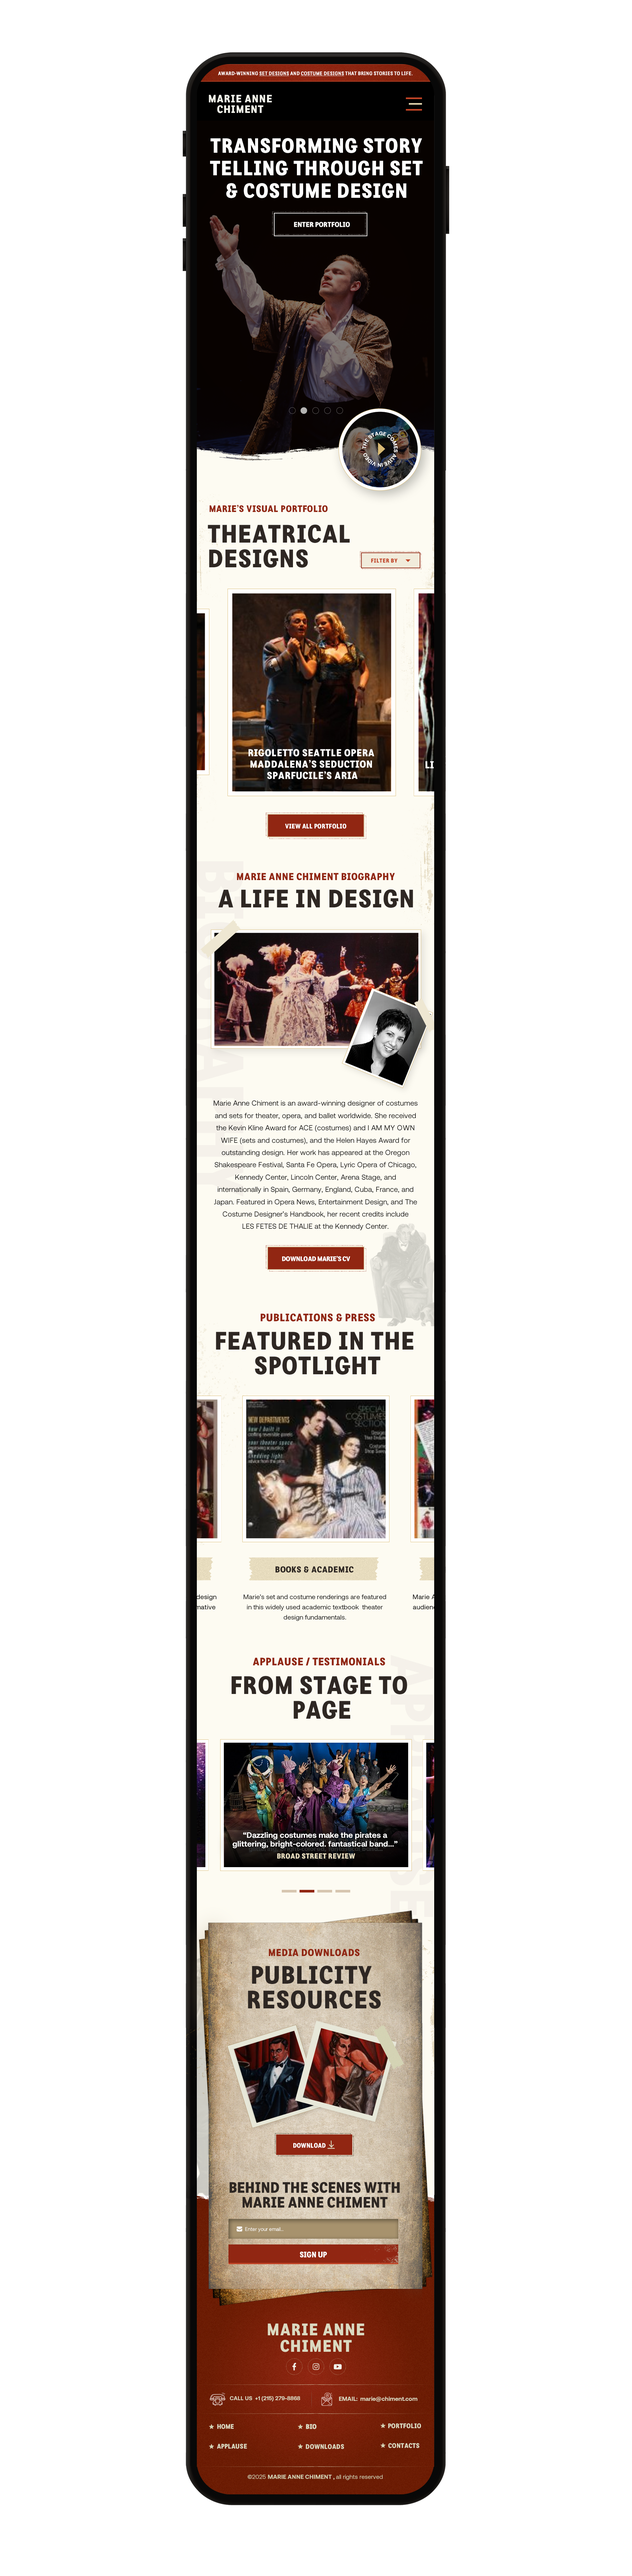
<style>
.page{position:relative;width:632px;height:2576px;background:#ffffff}
.page>*{position:absolute;margin:0}
.t1{font:4.9px "MatitaInformal-Medium";letter-spacing:0.01em;color:#ffffff;font-weight:bold}
.t2{font:4.9px "MatitaInformal-Medium";letter-spacing:0.01em;color:#ffffff;font-weight:bold;text-decoration:underline}
.t3{font:10.5px/10.5px "MatitaInformal-Bold";letter-spacing:0.06em;color:#f1f1e9}
.t4{font:20.1px/22.5px "MatitaInformal-Bold";letter-spacing:0.035em;color:#ffffff}
.t5{font:6.9px "MatitaInformal-Bold";color:#ffffff;scale:1.03 1}
.t6{font:5.3px/5.7px "Aeonik-Bold";letter-spacing:0.025em;color:#ffffff}
.t7{font:9.2px "MatitaInformal-Bold";letter-spacing:0.03em;color:#912612}
.t8{font:24.7px/24.7px "MatitaInformal-Bold";letter-spacing:0.032em;color:#2e2723}
.t9{font:5.6px "MatitaInformal-Bold";letter-spacing:0.05em;color:#c14426}
.t10{font:9.9px/11.4px "MatitaInformal-Bold";letter-spacing:0.04em;color:#ffffff}
.t11{font:6.6px "MatitaInformal-Bold";letter-spacing:0.025em;color:#ffffff;scale:0.96 1}
.t12{font:9.9px "MatitaInformal-Bold";letter-spacing:0.032em;color:#912612}
.t13{font:24.7px "MatitaInformal-Bold";letter-spacing:0.03em;color:#2e2723}
.t14{font:7.2px/12.3px "Aeonik-Regular";letter-spacing:0.002em;color:#141414}
.t15{font:6.6px "MatitaInformal-Bold";letter-spacing:-0.015em;color:#ffffff;scale:1.04 1}
.t16{font:10.5px "MatitaInformal-Bold";letter-spacing:0.035em;color:#912612}
.t17{font:24.7px/24.7px "MatitaInformal-Bold";letter-spacing:0.03em;color:#2e2723}
.t18{font:8.6px "MatitaInformal-Bold";letter-spacing:0.036em;color:#2e2723}
.t19{font:6.6px/10.2px "Aeonik-Regular";letter-spacing:0.002em;color:#141414}
.t20{font:7.9px/8.7px "Aeonik-Bold";color:#ffffff}
.t21{font:7.2px "MatitaInformal-Bold";letter-spacing:0.035em;color:#e7dcbe}
.t22{font:9.9px "MatitaInformal-Bold";letter-spacing:0.03em;color:#912612}
.t23{font:24.7px/24.7px "MatitaInformal-Bold";letter-spacing:0.035em;color:#2e2723}
.t24{font:6.6px "MatitaInformal-Bold";letter-spacing:0.03em;color:#ffffff;scale:0.95 1}
.t25{font:14.8px/14.8px "MatitaInformal-Bold";letter-spacing:0.006em;color:#2e2723}
.t26{font:5.2px "Aeonik-Regular";color:#ffffff;scale:0.94 1}
.t27{font:7.9px "MatitaInformal-Bold";color:#ffffff}
.t28{font:16.5px/16.5px "MatitaInformal-Bold";letter-spacing:0.05em;color:#dbd9c0}
.t29{font:5.6px "Aeonik-Bold";color:#dbd9c0}
.t30{font:5.9px "Aeonik-Bold";letter-spacing:0.001em;color:#dbd9c0}
.t31{font:6.6px "MatitaInformal-Bold";letter-spacing:0.002em;color:#dbd9c0}
.t32{font:6.6px "MatitaInformal-Bold";letter-spacing:0.002em;color:#dbd9c0;font-weight:bold}
.t33{font:6.6px "MatitaInformal-Bold";letter-spacing:0.015em;color:#dbd9c0}
.t34{font:6.6px "MatitaInformal-Bold";letter-spacing:0.02em;color:#dbd9c0}
.t35{font:6.6px "MatitaInformal-Bold";letter-spacing:0.025em;color:#dbd9c0}
.t36{font:6.6px "MatitaInformal-Bold";letter-spacing:0.04em;color:#dbd9c0}
.t37{font:5.9px "Aeonik-Bold";letter-spacing:0.003em;color:#d4d3b4}
.t38{font:5.9px "Aeonik-Regular";letter-spacing:0.003em;color:#d4d3b4}
</style>
<div class="page">
<p class="t1" style="left:218px;top:71px;width:195px;height:5px">AWARD-WINNING <span class="t2">SET DESIGNS</span> AND <span class="t2">COSTUME DESIGNS</span> THAT BRING STORIES TO LIFE.</p>
<p class="t3" style="left:209px;top:95px;width:63px;height:18px;text-align:center">MARIE ANNE <br>CHIMENT</p>
<p class="t4" style="left:210px;top:138px;width:213px;height:60px;text-align:center">TRANSFORMING STORY<br>TELLING THROUGH SET<br> &amp; COSTUME DESIGN</p>
<p class="t5" style="left:294px;top:222px;width:56px;height:5px">ENTER PORTFOLIO</p>
<p class="t6" style="left:362px;top:431px;width:36px;height:36px">THE STAGE COMES ALIVE IN VIDEO</p>
<p class="t7" style="left:209px;top:505px;width:119px;height:7px">MARIE’S VISUAL PORTFOLIO</p>
<p class="t8" style="left:208px;top:524px;width:142px;height:44px">THEATRICAL <br>DESIGNS</p>
<p class="t9" style="left:371px;top:558px;width:27px;height:5px">FILTER BY</p>
<p class="t10" style="left:249px;top:749px;width:125px;height:30px;text-align:center">RIGOLETTO SEATTLE OPERA <br>MADDALENA’S SEDUCTION <br>SPARFUCILE’S ARIA</p>
<p class="t11" style="left:285px;top:823px;width:61px;height:6px">VIEW ALL PORTFOLIO</p>
<p class="t12" style="left:237px;top:873px;width:158px;height:7px">MARIE ANNE CHIMENT BIOGRAPHY</p>
<p class="t13" style="left:218px;top:889px;width:195px;height:19px">A LIFE IN DESIGN</p>
<p class="t14" style="left:214px;top:1100px;width:204px;height:130px;text-align:center">Marie Anne Chiment is an award-winning designer of costumes and sets for theater, opera, and ballet worldwide. She received the Kevin Kline Award for ACE (costumes) and I AM MY OWN WIFE (sets and costumes), and the Helen Hayes Award for outstanding design. Her work has appeared at the Oregon Shakespeare Festival, Santa Fe Opera, Lyric Opera of Chicago, Kennedy Center, Lincoln Center, Arena Stage, and <br>internationally in Spain, Germany, England, Cuba, France, and Japan. Featured in Opera News, Entertainment Design, and The Costume Designer’s Handbook, her recent credits include<br>LES FETES DE THALIE at the Kennedy Center.</p>
<p class="t15" style="left:282px;top:1256px;width:68px;height:5px">DOWNLOAD MARIE’S CV</p>
<p class="t16" style="left:261px;top:1313px;width:114px;height:9px">PUBLICATIONS &amp; PRESS</p>
<p class="t17" style="left:216px;top:1332px;width:198px;height:43px;text-align:center">FEATURED IN THE <br>SPOTLIGHT</p>
<p class="t18" style="left:276px;top:1566px;width:78px;height:7px">BOOKS &amp; ACADEMIC</p>
<p class="t19" style="left:244px;top:1595px;width:142px;height:26px;text-align:center">Marie’s set and costume renderings are featured <br>in this widely used academic textbook  theater design fundamentals.</p>
<p class="t16" style="left:253px;top:1657px;width:132px;height:9px">APPLAUSE / TESTIMONIALS</p>
<p class="t17" style="left:231px;top:1676px;width:176px;height:43px;text-align:center">FROM STAGE TO<br> PAGE</p>
<p class="t20" style="left:232px;top:1832px;width:166px;height:16px;text-align:center">“Dazzling costumes make the pirates a<br>glittering, bright-colored. fantastical band...”</p>
<p class="t21" style="left:277px;top:1853px;width:78px;height:6px">BROAD STREET REVIEW</p>
<p class="t22" style="left:269px;top:1949px;width:91px;height:7px">MEDIA DOWNLOADS</p>
<p class="t23" style="left:248px;top:1966px;width:133px;height:43px;text-align:center">PUBLICITY <br>RESOURCES</p>
<p class="t24" style="left:293px;top:2143px;width:33px;height:5px">DOWNLOAD</p>
<p class="t25" style="left:229px;top:2182px;width:171px;height:26px;text-align:center">BEHIND THE SCENES WITH<br>MARIE ANNE CHIMENT</p>
<p class="t26" style="left:245px;top:2227px;width:38px;height:5px">Enter your email...</p>
<p class="t27" style="left:300px;top:2251px;width:27px;height:7px">SIGN UP</p>
<p class="t28" style="left:268px;top:2323px;width:96px;height:29px;text-align:center">MARIE ANNE CHIMENT</p>
<p class="t29" style="left:230px;top:2396px;width:70px;height:6px">CALL US  +1 (215) 279-8868</p>
<p class="t30" style="left:339px;top:2397px;width:78px;height:5px">EMAIL:  marie@chiment.com</p>
<p class="t31" style="left:217px;top:2424px;width:17px;height:5px">HOME</p>
<p class="t32" style="left:306px;top:2424px;width:11px;height:5px">BIO</p>
<p class="t33" style="left:388px;top:2423px;width:33px;height:5px">PORTFOLIO</p>
<p class="t34" style="left:217px;top:2444px;width:30px;height:5px">APPLAUSE</p>
<p class="t35" style="left:306px;top:2444px;width:38px;height:5px">DOWNLOADS</p>
<p class="t36" style="left:388px;top:2443px;width:31px;height:5px">CONTACTS</p>
<p class="t37" style="left:248px;top:2475px;width:135px;height:5px">©<span class="t38">2025 </span>MARIE ANNE CHIMENT , <span class="t38">all rights reserved</span></p>
</div>
